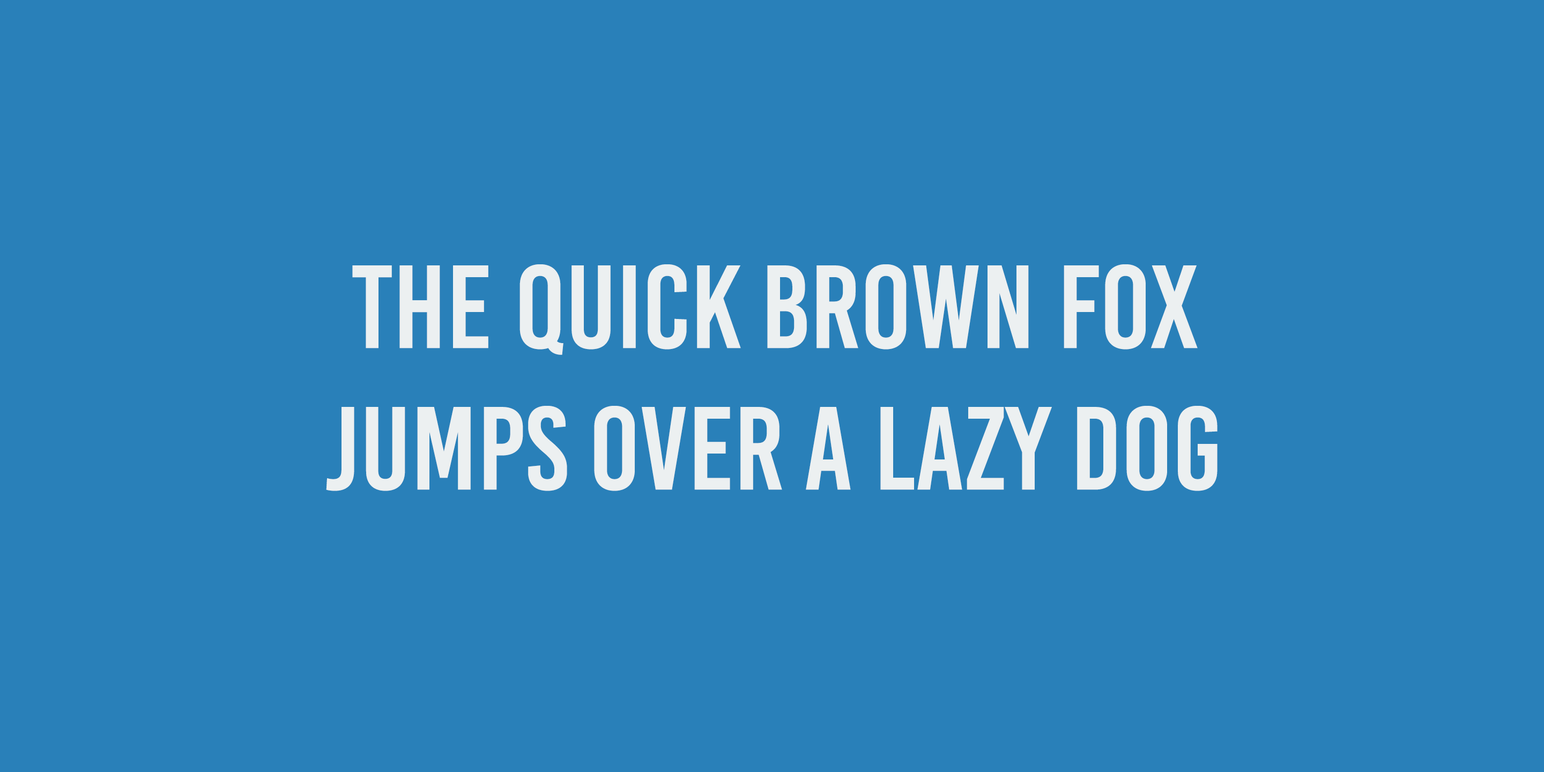
<style>
.page{position:relative;width:1544px;height:772px;background:#2980b9}
.page>*{position:absolute;margin:0}
.t1{font:118px "BebasKai";color:#ecf0f1}
</style>
<div class="page">
<p class="t1" style="left:326px;top:264px;width:892px;height:227px;text-align:center">the quick brown fox<br>jumps over a lazy dog</p>
</div>
